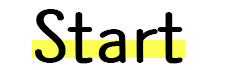
<style>
.page{position:relative;width:225px;height:70px;background:#ffffff}
.page>*{position:absolute;margin:0}
.t1{font:66.9px "NanumBarunpen-Bold";letter-spacing:-0.01em;color:#000000;scale:1.14 1}
</style>
<div class="page">
<p class="t1" style="left:35px;top:9px;width:148px;height:55px">Start</p>
</div>
